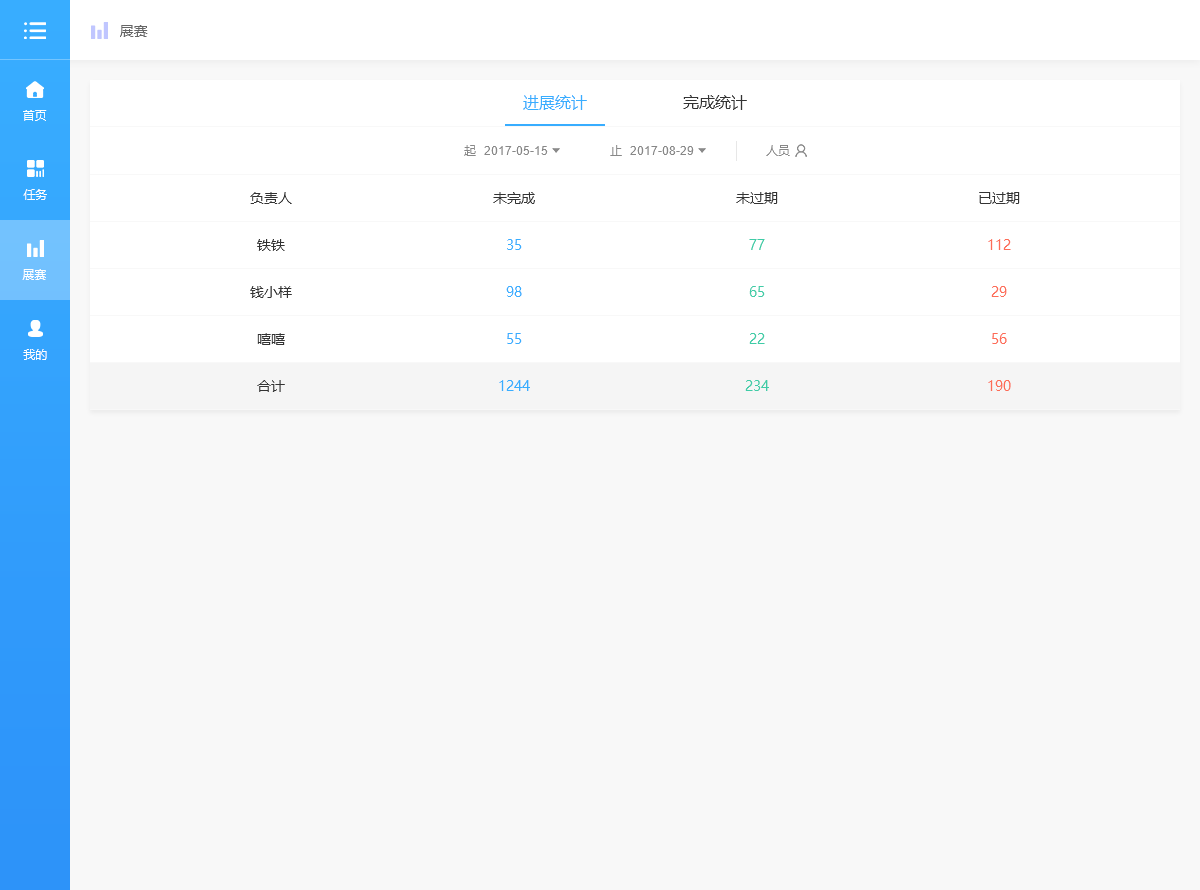
<style>
.page{position:relative;width:1200px;height:890px;background:#f8f8f8}
.page>*{position:absolute;margin:0}
.t1{font:14px "MicrosoftYaHei";color:#666666}
.t2{font:16px "MicrosoftYaHei";color:#38adff}
.t3{font:16px "MicrosoftYaHei";color:#333333}
.t4{font:12px "MicrosoftYaHei";color:#ffffff}
.t5{font:12px "MicrosoftYaHei";color:#888888}
.t6{font:12px "ArialMT";color:#888888}
.t7{font:14px "MicrosoftYaHei";color:#333333}
.t8{font:14px "MicrosoftYaHei";color:#38adff}
.t9{font:14px "MicrosoftYaHei";color:#3fcca7}
.t10{font:14px "MicrosoftYaHei";color:#fd6c57}
</style>
<div class="page">
<p class="t1" style="left:120px;top:25px;width:28px;height:12px">展赛</p>
<p class="t2" style="left:523px;top:95px;width:64px;height:15px">进展统计</p>
<p class="t3" style="left:683px;top:95px;width:64px;height:15px">完成统计</p>
<p class="t4" style="left:23px;top:110px;width:24px;height:11px">首页</p>
<p class="t5" style="left:464px;top:145px;width:12px;height:11px">起</p>
<p class="t6" style="left:484px;top:146px;width:64px;height:9px">2017-05-15</p>
<p class="t5" style="left:610px;top:145px;width:12px;height:11px">止</p>
<p class="t6" style="left:630px;top:146px;width:64px;height:9px">2017-08-29</p>
<p class="t5" style="left:766px;top:145px;width:24px;height:11px">人员</p>
<p class="t4" style="left:23px;top:189px;width:24px;height:11px">任务</p>
<p class="t7" style="left:250px;top:192px;width:42px;height:12px">负责人</p>
<p class="t7" style="left:493px;top:192px;width:42px;height:12px">未完成</p>
<p class="t7" style="left:736px;top:192px;width:42px;height:12px">未过期</p>
<p class="t7" style="left:979px;top:192px;width:41px;height:12px">已过期</p>
<p class="t7" style="left:257px;top:239px;width:28px;height:12px">铁铁</p>
<p class="t8" style="left:507px;top:239px;width:15px;height:11px">35</p>
<p class="t9" style="left:749px;top:239px;width:16px;height:11px">77</p>
<p class="t10" style="left:988px;top:239px;width:23px;height:11px">112</p>
<p class="t4" style="left:22px;top:269px;width:24px;height:11px">展赛</p>
<p class="t7" style="left:250px;top:286px;width:42px;height:12px">钱小样</p>
<p class="t8" style="left:506px;top:286px;width:16px;height:11px">98</p>
<p class="t9" style="left:749px;top:286px;width:16px;height:11px">65</p>
<p class="t10" style="left:991px;top:286px;width:16px;height:11px">29</p>
<p class="t7" style="left:257px;top:333px;width:28px;height:12px">嘻嘻</p>
<p class="t8" style="left:507px;top:333px;width:15px;height:11px">55</p>
<p class="t9" style="left:749px;top:333px;width:16px;height:11px">22</p>
<p class="t10" style="left:992px;top:333px;width:15px;height:11px">56</p>
<p class="t4" style="left:23px;top:349px;width:24px;height:11px">我的</p>
<p class="t7" style="left:257px;top:380px;width:28px;height:12px">合计</p>
<p class="t8" style="left:499px;top:380px;width:31px;height:11px">1244</p>
<p class="t9" style="left:745px;top:380px;width:24px;height:11px">234</p>
<p class="t10" style="left:988px;top:380px;width:23px;height:11px">190</p>
</div>
